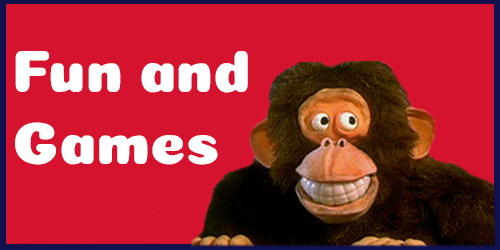
<style>
.page{position:relative;width:500px;height:250px;background:#d5132e}
.page>*{position:absolute;margin:0}
.t1{font:60px "Coiny-Regular";color:#ffffff}
</style>
<div class="page">
<p class="t1" style="left:15px;top:51px;width:233px;height:114px">Fun and Games</p>
</div>
